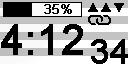
<style>
.page{position:relative;width:128px;height:64px;background:#000000}
.page>*{position:absolute;margin:0}
.t1{font:12.7px "ArialMT";color:#000000;font-weight:bold}
.t2{font:41.7px "ArialMT";color:#000000;font-weight:bold}
.t3{font:33.3px "ArialMT";color:#000000;font-weight:bold}
</style>
<div class="page">
<p class="t1" style="left:44px;top:4px;width:28px;height:10px">35%</p>
<p class="t2" style="left:1px;top:24px;width:82px;height:31px">4:12</p>
<p class="t3" style="left:91px;top:39px;width:37px;height:25px">34</p>
</div>
